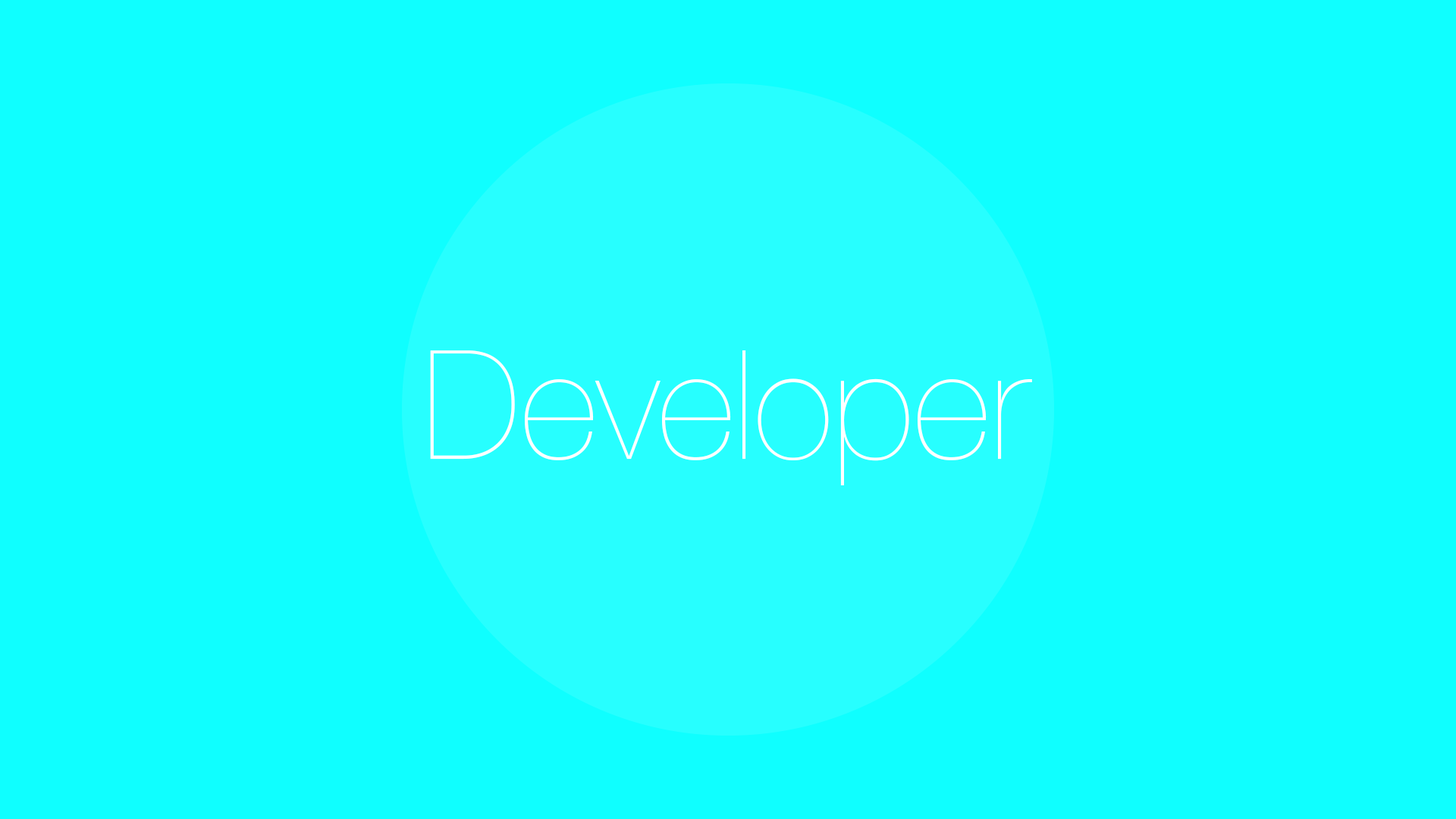
<style>
.page{position:relative;width:1456px;height:819px;background:#0fffff}
.page>*{position:absolute;margin:0}
.t1{font:151.7px "HelveticaNeue-UltraLight";color:#ffffff}
</style>
<div class="page">
<p class="t1" style="left:430px;top:350px;width:602px;height:135px">Developer</p>
</div>
